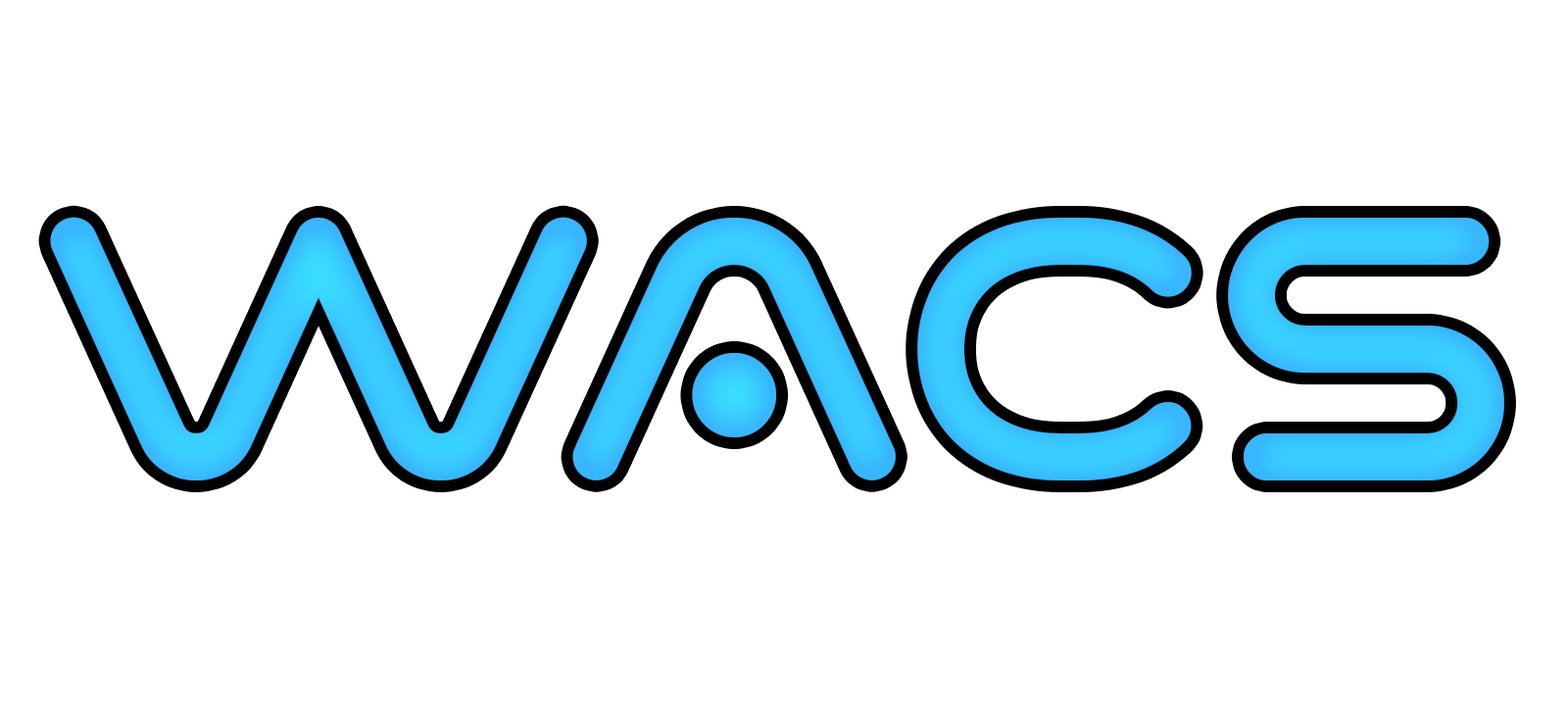
<style>
.page{position:relative;width:1568px;height:706px;background:#ffffff}
.page>*{position:absolute;margin:0}
.t1{font:367.5px "VarinoNormal-Regular";color:#38b6ff}
</style>
<div class="page">
<p class="t1" style="left:50px;top:217px;width:1454px;height:263px">WACS</p>
</div>
